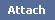
<style>
.page{position:relative;width:55px;height:20px;background:#566c99}
.page>*{position:absolute;margin:0}
.t1{font:11px "Tahoma-Bold";color:#ffffff}
</style>
<div class="page">
<p class="t1" style="left:8px;top:5px;width:37px;height:9px">Attach</p>
</div>
